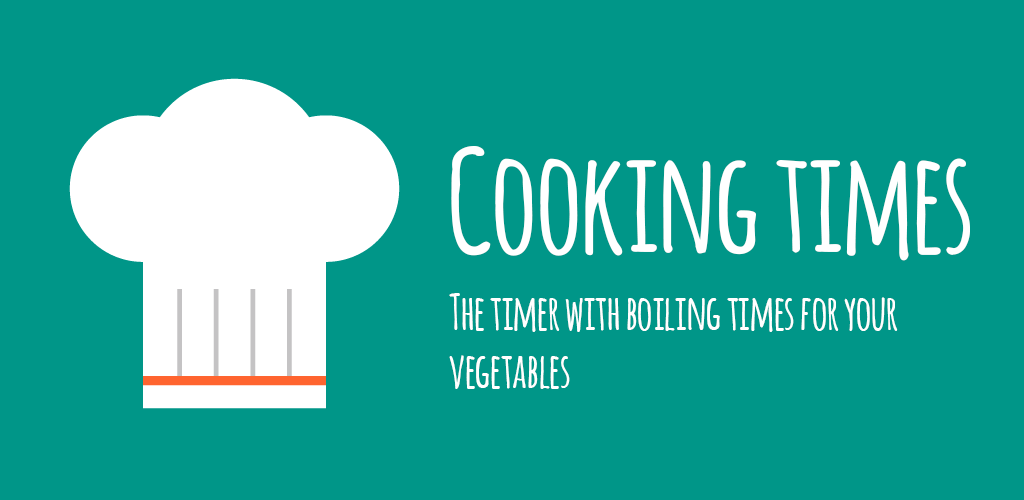
<style>
.page{position:relative;width:1024px;height:500px;background:#009688}
.page>*{position:absolute;margin:0}
.t1{font:140px "Amatic-Bold";color:#ffffff}
.t2{font:48px "Amatic-Bold";color:#ffffff}
</style>
<div class="page">
<p class="t1" style="left:451px;top:146px;width:519px;height:115px">Cooking times</p>
<p class="t2" style="left:449px;top:293px;width:449px;height:96px">The timer with boiling times for your <br>vegetables</p>
</div>
